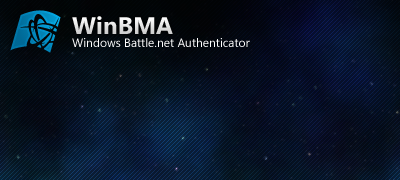
<style>
.page{position:relative;width:400px;height:180px}
.page>*{position:absolute;margin:0}
.t1{font:24px "SegoeUI-Bold";color:#e2e2e2}
.t2{font:12px "SegoeUI";color:#ffffff}
</style>
<div class="page">
<p class="t1" style="left:72px;top:16px;width:101px;height:18px">WinBMA</p>
<p class="t2" style="left:72px;top:38px;width:178px;height:9px">Windows Battle.net Authenticator</p>
</div>
